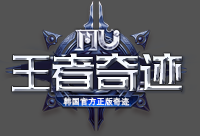
<style>
.page{position:relative;width:200px;height:136px;background:#535353}
.page>*{position:absolute;margin:0}
.t1{font:63.1px "HuXiaoBoKuHei";letter-spacing:-0.01em;scale:0.7 1}
.t2{font:59.6px "HuXiaoBoKuHei";letter-spacing:-0.01em;scale:0.7 1}
.t3{font:8.1px "DengXian";letter-spacing:0.032em;color:#ffffff}
</style>
<div class="page">
<p class="t1" style="left:12px;top:53px;width:170px;height:39px"><span class="t2">王</span>者奇迹</p>
<p class="t3" style="left:63px;top:97px;width:67px;height:9px">韩国官方正版奇迹</p>
</div>
